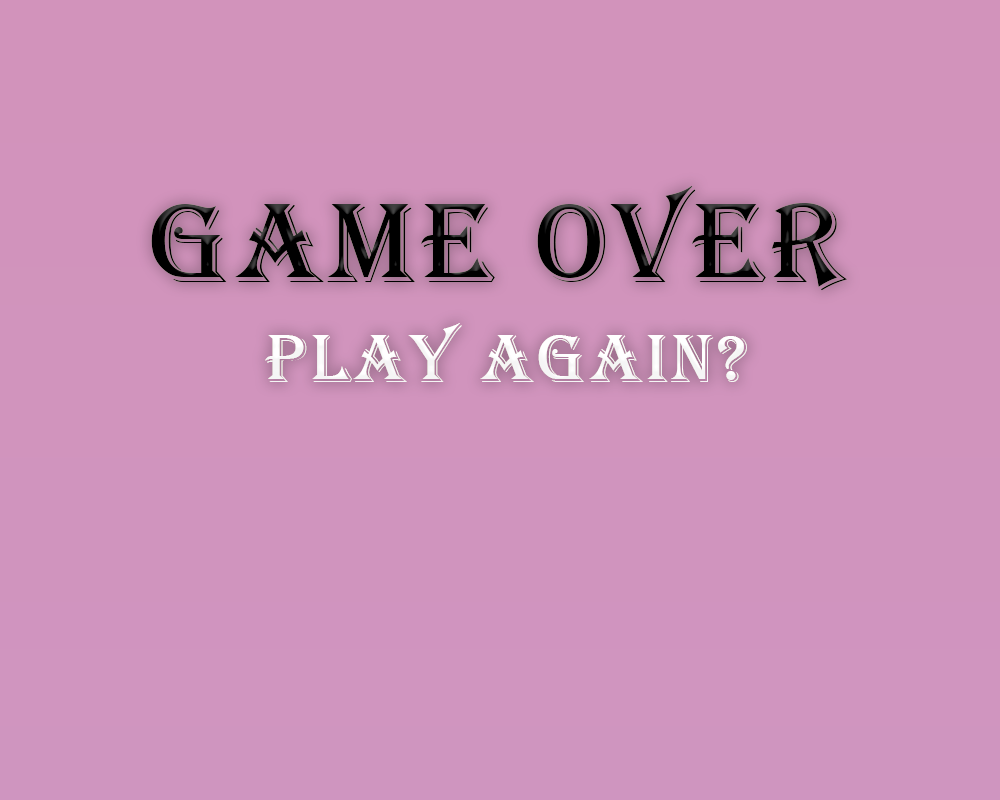
<style>
.page{position:relative;width:1000px;height:800px}
.page>*{position:absolute;margin:0}
.t1{font:117px "Algerian";letter-spacing:0.05em;color:#000000}
.t2{font:70.7px "Algerian";letter-spacing:0.05em;color:#ffffff}
</style>
<div class="page">
<p class="t1" style="left:151px;top:185px;width:697px;height:106px">GAME OVER</p>
<p class="t2" style="left:265px;top:323px;width:482px;height:59px">PLAY AGAIN?</p>
</div>
